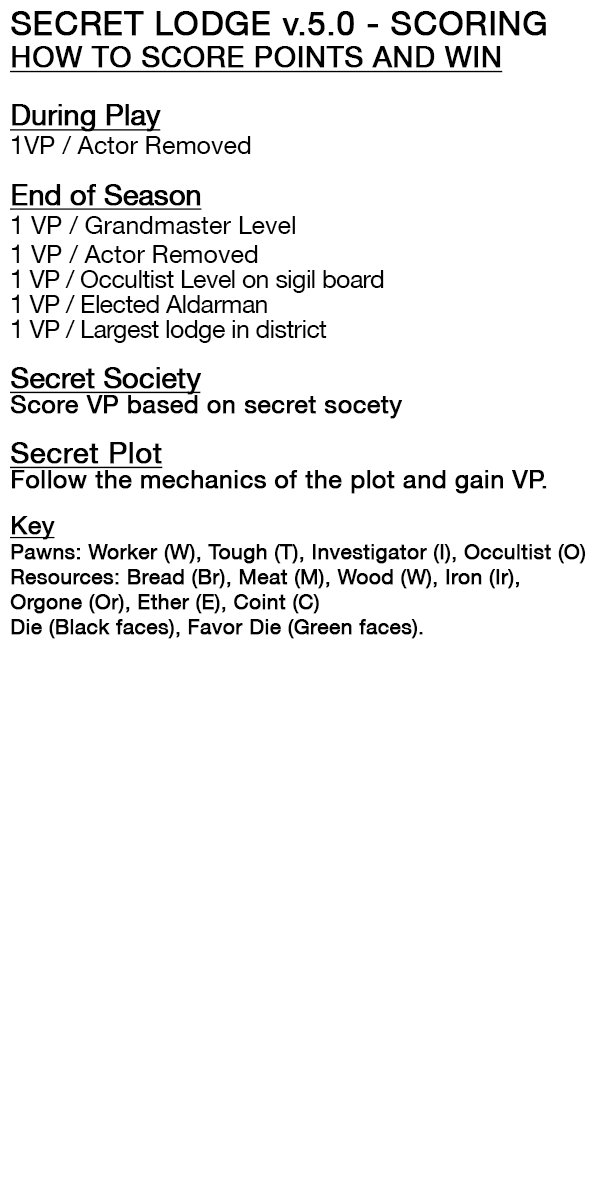
<style>
.page{position:relative;width:600px;height:1200px;background:#ffffff}
.page>*{position:absolute;margin:0}
.t1{font:33.3px "HelveticaNeueLT-Roman";color:#000000;font-weight:bold}
.t2{font:20.8px/25px "HelveticaNeueLT-Roman";color:#000000;font-weight:bold}
.t3{font:29.2px/29.2px "HelveticaNeueLT-Roman";color:#000000;font-weight:bold;text-decoration:underline}
.t4{font:29.2px/29.2px "HelveticaNeueLT-Roman";letter-spacing:-0.025em;color:#000000;font-weight:bold;text-decoration:underline}
.t5{font:25px/29.2px "HelveticaNeueLT-Roman";color:#000000}
.t6{font:29.2px/16.7px "HelveticaNeueLT-Roman";letter-spacing:-0.025em;color:#000000;font-weight:bold;text-decoration:underline}
.t7{font:25px/25px "HelveticaNeueLT-Roman";letter-spacing:-0.025em;color:#000000}
.t8{font:29.2px/25px "HelveticaNeueLT-Roman";letter-spacing:-0.025em;color:#000000;font-weight:bold;text-decoration:underline}
.t9{font:25px/25px "HelveticaNeueLT-Roman";color:#000000;font-weight:bold}
.t10{font:29.2px/25px "HelveticaNeueLT-Roman";color:#000000;font-weight:bold;text-decoration:underline}
.t11{font:25px/29.2px "HelveticaNeueLT-Roman";color:#000000;font-weight:bold;text-decoration:underline}
</style>
<div class="page">
<p class="t1" style="left:11px;top:11px;width:535px;height:25px">SECRET LODGE v.5.0 - SCORING</p>
<p class="t2" style="left:10px;top:46px;width:576px;height:593px"><span class="t3">HOW TO SCORE POINTS AND WIN<br><br></span><span class="t4">During Play<br></span><span class="t5">1VP / Actor Removed<br><br><br></span><span class="t6">End of Season<br></span><span class="t5">1 VP / Grandmaster Level<br>1 VP / Actor Removed<br></span><span class="t7">1 VP / Occultist Level on sigil board<br>1 VP / Elected Aldarman<br>1 VP / Largest lodge in district<br><br></span><span class="t8">Secret Society<br></span><span class="t9">Score VP based on secret socety <br><br></span><span class="t10">Secret Plot<br></span><span class="t9">Follow the mechanics of the plot and gain VP.<br><br></span><span class="t11">Key<br></span>Pawns: Worker (W), Tough (T), Investigator (I), Occultist (O)<br>Resources: Bread (Br), Meat (M), Wood (W), Iron (Ir), <br>Orgone (Or), Ether (E), Coint (C)<br>Die (Black faces), Favor Die (Green faces).</p>
</div>
